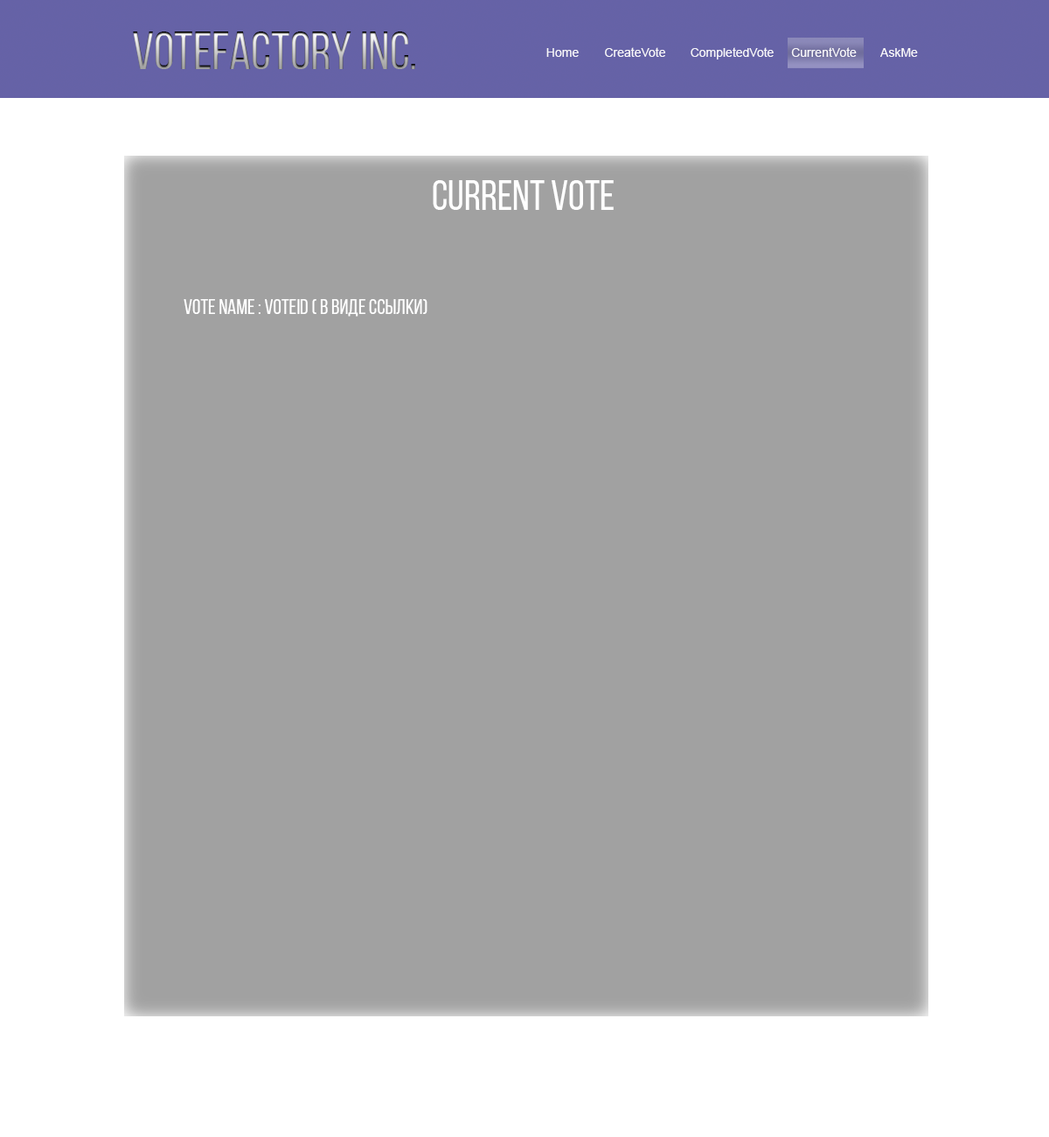
<style>
.page{position:relative;width:1049px;height:1137px;background:#a1a1a1}
.page>*{position:absolute;margin:0}
.t1{font:52.5px "BebasNeueRegular"}
.t2{font:12.2px "ArialMT";color:#f8f7fa}
.t3{font:42px "BebasNeueRegular";color:#ffffff}
.t4{font:21px "BebasNeueRegular";color:#ffffff}
</style>
<div class="page">
<p class="t1" style="left:133px;top:31px;width:282px;height:38px">Votefactory inc.</p>
<p class="t2" style="left:546px;top:48px;width:33px;height:9px">Home</p>
<p class="t2" style="left:605px;top:47px;width:60px;height:10px">CreateVote</p>
<p class="t2" style="left:691px;top:47px;width:83px;height:12px">CompletedVote</p>
<p class="t2" style="left:791px;top:47px;width:66px;height:10px">CurrentVote</p>
<p class="t2" style="left:880px;top:48px;width:38px;height:9px">AskMe</p>
<p class="t3" style="left:433px;top:180px;width:181px;height:30px">current vote</p>
<p class="t4" style="left:184px;top:299px;width:244px;height:17px">vote name : voteId ( в виде ссылки)</p>
</div>
